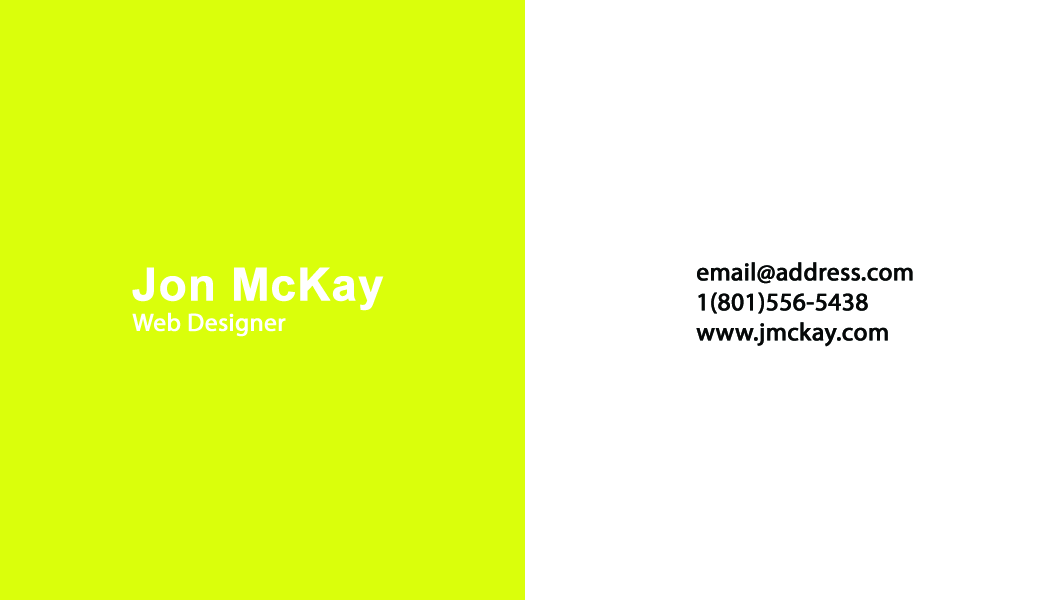
<style>
.page{position:relative;width:1050px;height:600px;background:#ffffff}
.page>*{position:absolute;margin:0}
.t1{font:25px "MyriadPro-Regular";color:#ffffff;font-weight:bold}
.t2{font:45.8px "Arial-BoldMT";color:#ffffff;font-weight:bold}
.t3{font:25px "MyriadPro-Regular";color:#060808;font-weight:bold}
</style>
<div class="page">
<p class="t1" style="left:132px;top:267px;width:252px;height:70px"><span class="t2">Jon McKay<br></span>Web Designer</p>
<p class="t3" style="left:696px;top:262px;width:217px;height:85px">email@address.com<br>1(801)556-5438<br>www.jmckay.com</p>
</div>
